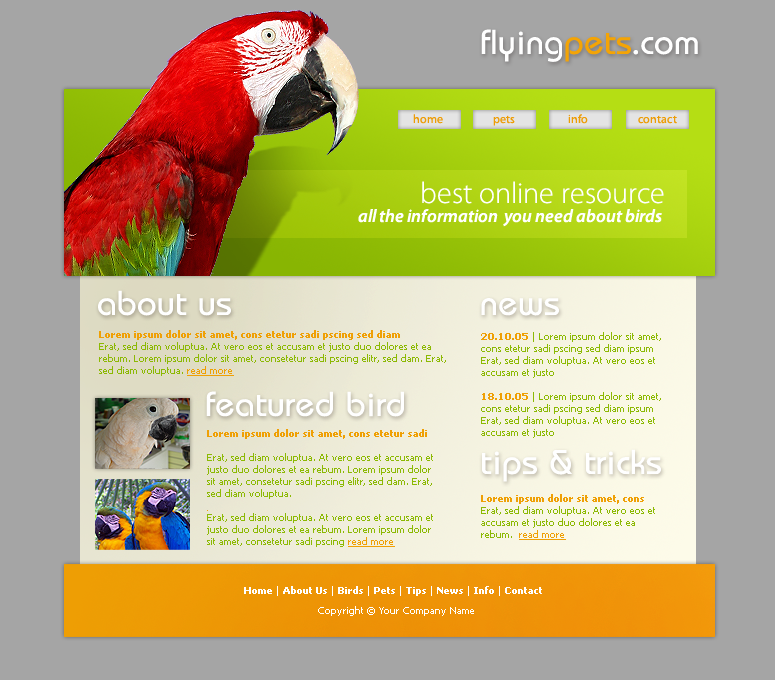
<style>
.page{position:relative;width:775px;height:680px;background:#a5a5a5}
.page>*{position:absolute;margin:0}
.t1{font:36px "Opal";color:#ffffff}
.t2{font:36px "Opal";color:#f4a405}
.t3{font:12px "MyriadPro-Regular";color:#ed9c05}
.t4{font:30px "MyriadPro-Light";color:#ffffff}
.t5{font:18px "MyriadPro-SemiboldIt";color:#ffffff}
.t6{font:10px "Tahoma";color:#8cb903}
.t7{font:10px "Tahoma-Bold";color:#efa005}
.t8{font:10px "Tahoma";color:#efa005;text-decoration:underline}
.t9{font:10px "Tahoma-Bold";color:#ffffff}
.t10{font:10px "Tahoma";color:#ffffff}
</style>
<div class="page">
<p class="t1" style="left:481px;top:29px;width:217px;height:33px">flying<span class="t2">pets</span>.com</p>
<p class="t3" style="left:413px;top:114px;width:30px;height:10px">home</p>
<p class="t3" style="left:493px;top:115px;width:22px;height:11px">pets</p>
<p class="t3" style="left:568px;top:114px;width:20px;height:10px">info</p>
<p class="t3" style="left:638px;top:115px;width:39px;height:9px">contact</p>
<p class="t4" style="left:422px;top:181px;width:242px;height:23px">best online resource</p>
<p class="t5" style="left:358px;top:209px;width:304px;height:18px">all the information  you need about birds</p>
<p class="t1" style="left:98px;top:290px;width:133px;height:26px">about us</p>
<p class="t1" style="left:481px;top:298px;width:78px;height:18px">news</p>
<p class="t6" style="left:99px;top:330px;width:347px;height:46px"><span class="t7">Lorem ipsum dolor sit amet, cons etetur sadi pscing sed diam <br></span>Erat, sed diam voluptua. At vero eos et accusam et justo duo dolores et ea rebum. Lorem ipsum dolor sit amet, consetetur sadi pscing elitr, sed dam. Erat, sed diam voluptua. <span class="t8">read more</span></p>
<p class="t6" style="left:481px;top:332px;width:180px;height:106px"><span class="t7">20.10.05</span> | Lorem ipsum dolor sit amet, cons etetur sadi pscing sed diam ipsum Erat, sed diam voluptua. At vero eos et accusam et justo <br><br><span class="t7">18.10.05</span> | Lorem ipsum dolor sit amet, cons etetur sadi pscing sed diam ipsum Erat, sed diam voluptua. At vero eos et accusam et justo</p>
<p class="t1" style="left:206px;top:391px;width:198px;height:26px">featured bird</p>
<p class="t6" style="left:207px;top:429px;width:226px;height:118px"><span class="t7">Lorem ipsum dolor sit amet, cons etetur sadi <br><br></span>Erat, sed diam voluptua. At vero eos et accusam et justo duo dolores et ea rebum. Lorem ipsum dolor sit amet, consetetur sadi pscing elitr, sed dam. Erat, sed diam voluptua. <br><br>Erat, sed diam voluptua. At vero eos et accusam et justo duo dolores et ea rebum. Lorem ipsum dolor sit amet, consetetur sadi pscing <span class="t8">read more</span></p>
<p class="t1" style="left:482px;top:449px;width:179px;height:33px">tips &amp; tricks</p>
<p class="t6" style="left:481px;top:494px;width:174px;height:46px"><span class="t7">Lorem ipsum dolor sit amet, cons <br></span>Erat, sed diam voluptua. At vero eos et accusam et justo duo dolores et ea rebum.  <span class="t8">read more</span></p>
<p class="t9" style="left:244px;top:586px;width:298px;height:10px"><span class="t10">  </span>Home<span class="t10"> | </span>About Us <span class="t10">| </span>Birds <span class="t10">| </span>Pets <span class="t10">| </span>Tips <span class="t10">| </span>News<span class="t10"> | </span>Info<span class="t10"> | </span>Contact</p>
<p class="t10" style="left:318px;top:606px;width:156px;height:10px">Copyright © Your Company Name</p>
</div>
